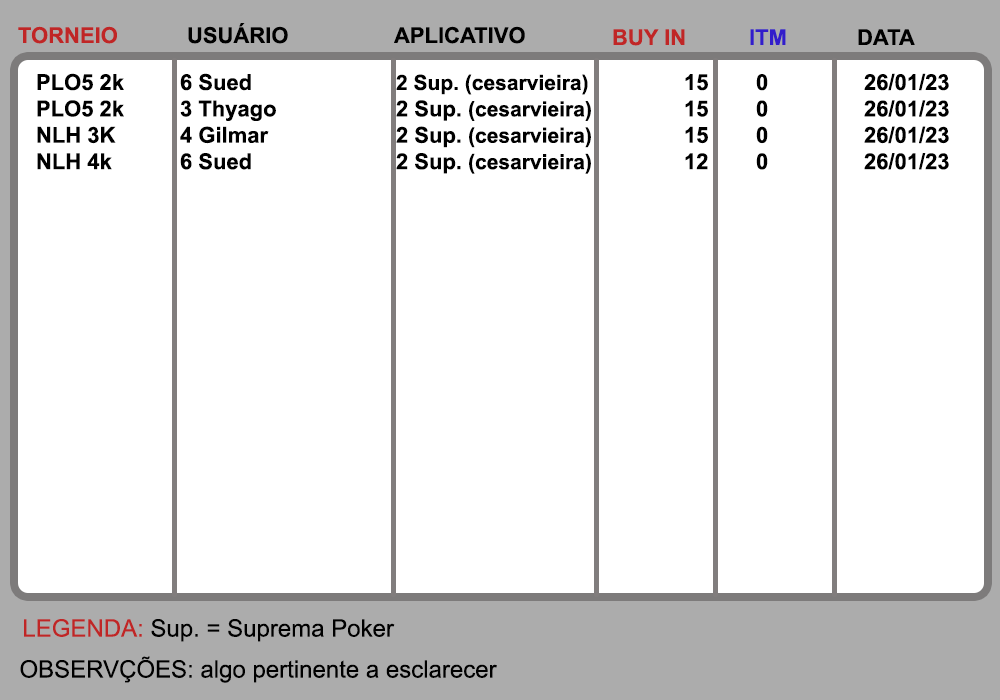
<style>
.page{position:relative;width:1000px;height:700px;background:#ffffff}
.page>*{position:absolute;margin:0}
.t1{font:22px "Arial-BoldMT";color:#c02626}
.t2{font:22px "Arial-BoldMT";color:#000000}
.t3{font:22px "Arial-BoldMT";color:#321dcb}
.t4{font:21px "Arial-BoldMT";color:#000000}
.t5{font:24px "ArialMT";color:#000000}
.t6{font:24px "ArialMT";color:#c02626}
</style>
<div class="page">
<p class="t1" style="left:18px;top:26px;width:99px;height:18px">TORNEIO</p>
<p class="t2" style="left:188px;top:23px;width:100px;height:21px">USUÁRIO</p>
<p class="t2" style="left:394px;top:26px;width:131px;height:18px">APLICATIVO</p>
<p class="t1" style="left:613px;top:29px;width:72px;height:17px">BUY IN</p>
<p class="t3" style="left:750px;top:29px;width:36px;height:16px">ITM</p>
<p class="t2" style="left:858px;top:29px;width:57px;height:16px">DATA</p>
<p class="t2" style="left:37px;top:73px;width:912px;height:101px">PLO5 2k  6 Sued     <span class="t4">2 Sup. (cesarvieira)</span>   15  0   26/01/23<br>PLO5 2k  3 Thyago     2 Sup. <span class="t4">(cesarvieira)</span>   15  0   26/01/23<br>NLH 3K  4 Gilmar     2 Sup. <span class="t4">(cesarvieira)</span>   15  0   26/01/23<br>NLH 4k  6 Sued    2 Sup. <span class="t4">(cesarvieira)</span>   12  0   26/01/23</p>
<p class="t5" style="left:24px;top:619px;width:371px;height:23px"><span class="t6">LEGENDA:</span> Sup. = Suprema Poker</p>
<p class="t5" style="left:20px;top:656px;width:477px;height:27px">OBSERVÇÕES: algo pertinente a esclarecer</p>
</div>
